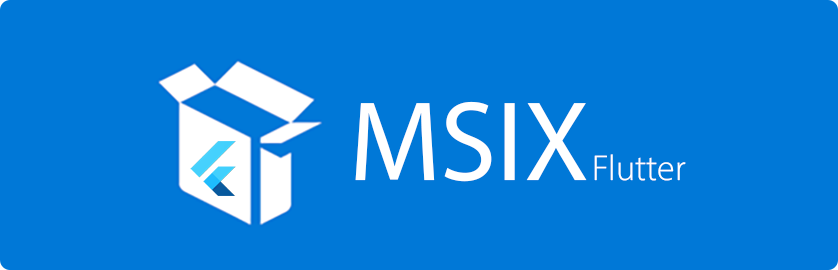
<style>
.page{position:relative;width:838px;height:270px;background:#0078d7}
.page>*{position:absolute;margin:0}
.t1{font:114px "MyriadConceptRoman-Regular";color:#ffffff}
.t2{font:36px "MyriadConceptRoman-Light";color:#ffffff}
</style>
<div class="page">
<p class="t1" style="left:355px;top:101px;width:232px;height:81px">MSIX</p>
<p class="t2" style="left:594px;top:154px;width:92px;height:27px">Flutter</p>
</div>
